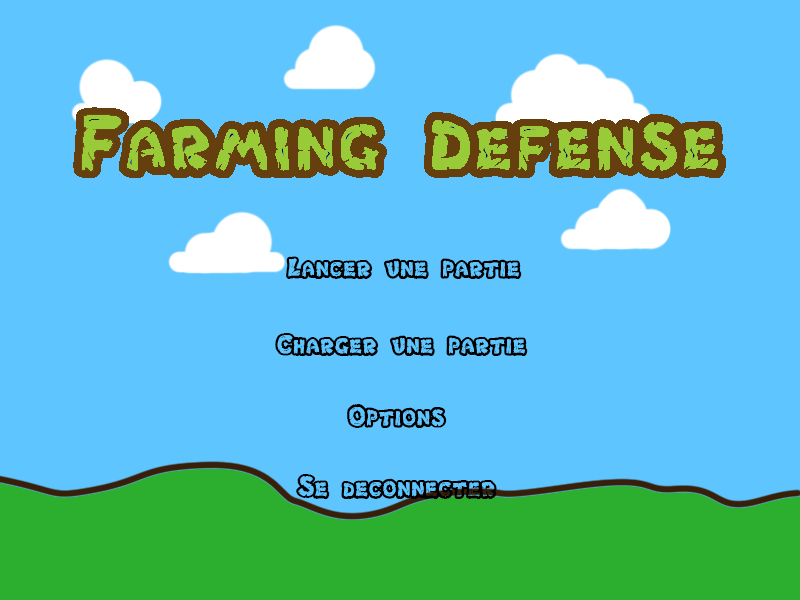
<style>
.page{position:relative;width:800px;height:600px;background:#5fc5ff}
.page>*{position:absolute;margin:0}
.t1{font:30px "Chlorinar";color:#000000}
</style>
<div class="page">
<p class="t1" style="left:286px;top:256px;width:236px;height:23px">Lancer une partie</p>
<p class="t1" style="left:275px;top:333px;width:253px;height:23px">Charger une partie</p>
<p class="t1" style="left:347px;top:404px;width:100px;height:24px">Options</p>
<p class="t1" style="left:296px;top:474px;width:201px;height:25px">Se deconnecter</p>
</div>
